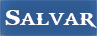
<style>
.page{position:relative;width:97px;height:36px;background:#2f5a90}
.page>*{position:absolute;margin:0}
.t1{font:24px "GodOfWar";color:#ffffff}
</style>
<div class="page">
<p class="t1" style="left:5px;top:10px;width:92px;height:18px">Salvar</p>
</div>
